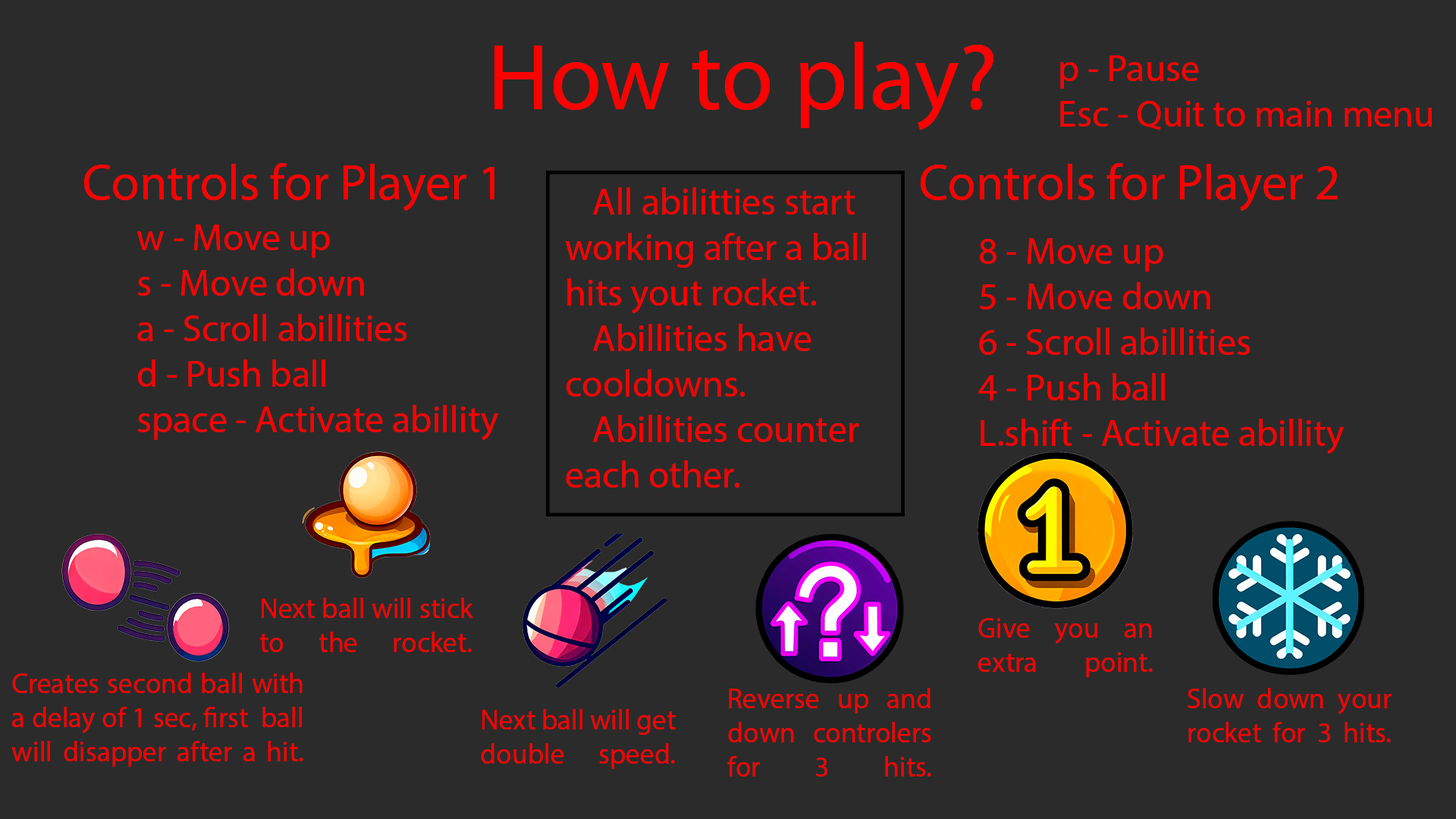
<style>
.page{position:relative;width:1456px;height:819px;background:#2b2b2b}
.page>*{position:absolute;margin:0}
.t1{font:94.8px "MyriadPro-Regular";color:#ff0000}
.t2{font:37.9px "MyriadPro-Regular";color:#ff0000}
.t3{font:50.6px "MyriadPro-Regular";color:#ff0000}
.t4{font:28.4px "MyriadPro-Regular";color:#ff0000}
</style>
<div class="page">
<p class="t1" style="left:494px;top:42px;width:499px;height:88px">How to play?</p>
<p class="t2" style="left:1060px;top:55px;width:372px;height:75px">p - Pause<br>Esc - Quit to main menu</p>
<p class="t3" style="left:84px;top:163px;width:410px;height:48px">Controls for Player 1</p>
<p class="t3" style="left:921px;top:163px;width:417px;height:48px">Controls for Player 2</p>
<p class="t2" style="left:565px;top:187px;width:301px;height:301px">All abilitties start working after a ball hits yout rocket. <br> Abillities have cooldowns. <br> Abillities counter each other.</p>
<p class="t2" style="left:136px;top:224px;width:362px;height:217px">w - Move up<br>s - Move down<br>a - Scroll abillities<br>d - Push ball<br>space - Activate abillity</p>
<p class="t2" style="left:978px;top:238px;width:366px;height:216px">8 - Move up<br>5 - Move down<br>6 - Scroll abillities<br>4 - Push ball<br>L.shift - Activate abillity</p>
<p class="t4" style="left:260px;top:598px;width:213px;height:54px;text-align:justify">Next ball will stick to the rocket.</p>
<p class="t4" style="left:978px;top:618px;width:175px;height:59px;text-align:justify">Give you an extra point.</p>
<p class="t4" style="left:11px;top:673px;width:292px;height:94px;text-align:justify">Creates second ball with a delay of 1 sec, first  ball will disapper after a hit.</p>
<p class="t4" style="left:727px;top:688px;width:204px;height:89px;text-align:justify">Reverse up and down  controlers for 3 hits.</p>
<p class="t4" style="left:1188px;top:688px;width:204px;height:54px;text-align:justify">Slow down your rocket for 3 hits.</p>
<p class="t4" style="left:481px;top:709px;width:195px;height:60px;text-align:justify">Next ball will get double speed.<br>.</p>
</div>
